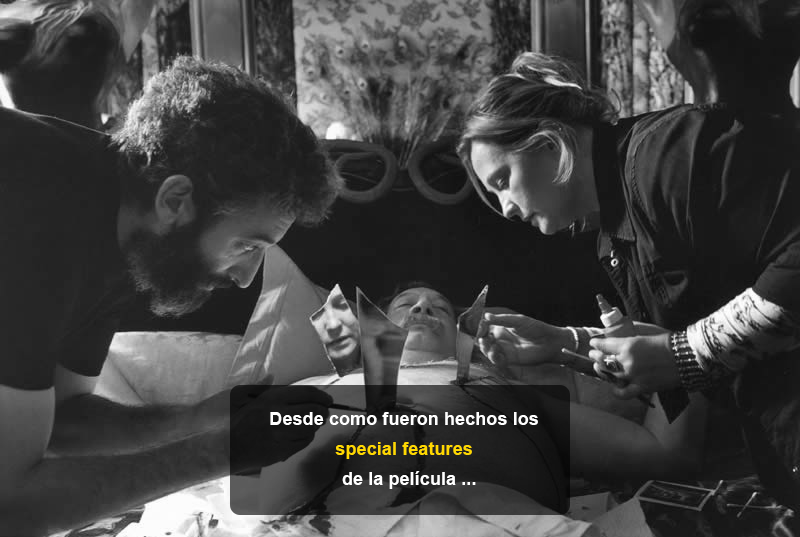
<style>
.page{position:relative;width:800px;height:537px}
.page>*{position:absolute;margin:0}
.t1{font:18px/30px "Arial-BoldMT";letter-spacing:0.005em;color:#ffffff}
.t2{font:18px/30px "Arial-BoldMT";letter-spacing:0.005em;color:#ffd800}
</style>
<div class="page">
<p class="t1" style="left:270px;top:412px;width:268px;height:77px;text-align:center">Desde como fueron hechos los <br><span class="t2">special features <br></span> de la película ...</p>
</div>
